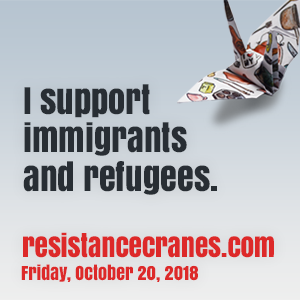
<style>
.page{position:relative;width:300px;height:300px}
.page>*{position:absolute;margin:0}
.t1{font:34.5px/34.5px "Anton";color:#282e34}
.t2{font:27.9px "Anton";color:#dd2929}
.t3{font:18px "Anton";color:#dd2929}
</style>
<div class="page">
<p class="t1" style="left:23px;top:84px;width:194px;height:111px">I support<br>immigrants<br>and refugees.</p>
<p class="t2" style="left:23px;top:232px;width:251px;height:26px">resistancecranes.com</p>
<p class="t3" style="left:21px;top:264px;width:177px;height:18px">Friday, October 20, 2018</p>
</div>
